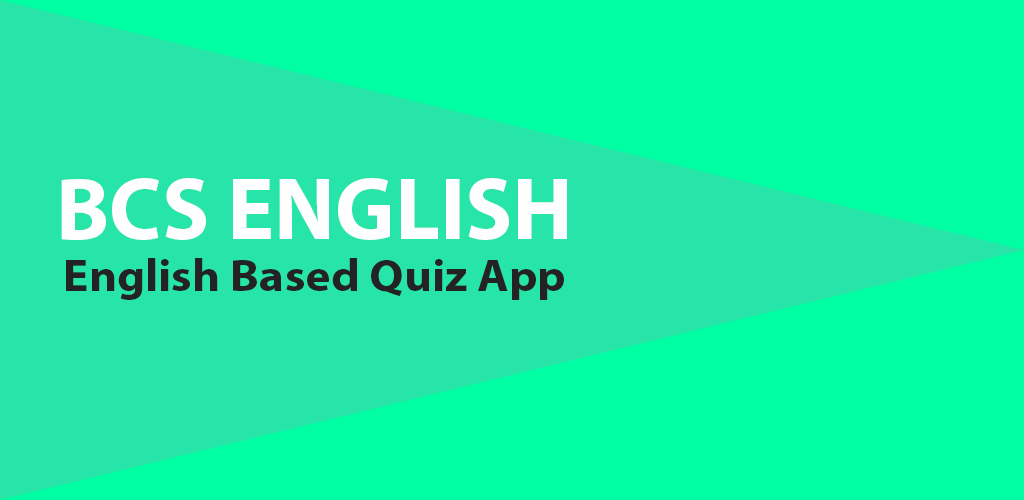
<style>
.page{position:relative;width:1024px;height:500px;background:#00ffa2}
.page>*{position:absolute;margin:0}
.t1{font:88.3px "MyriadPro-Bold";color:#fefefe}
.t2{font:45.1px "MyriadPro-Bold";color:#242323;scale:1.07 1}
</style>
<div class="page">
<p class="t1" style="left:61px;top:178px;width:506px;height:62px">BCS ENGLISH</p>
<p class="t2" style="left:66px;top:258px;width:498px;height:42px">English Based Quiz App</p>
</div>
